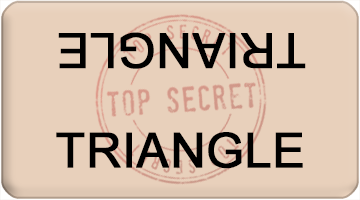
<style>
.page{position:relative;width:360px;height:200px;background:#e8d0bb}
.page>*{position:absolute;margin:0}
.t1{font:48px "ArialMT";color:#000000;font-weight:bold}
</style>
<div class="page">
<p class="t1" style="left:58px;top:32px;width:248px;height:37px;rotate:180deg">TRIANGLE</p>
<p class="t1" style="left:56px;top:132px;width:247px;height:37px">TRIANGLE</p>
</div>
